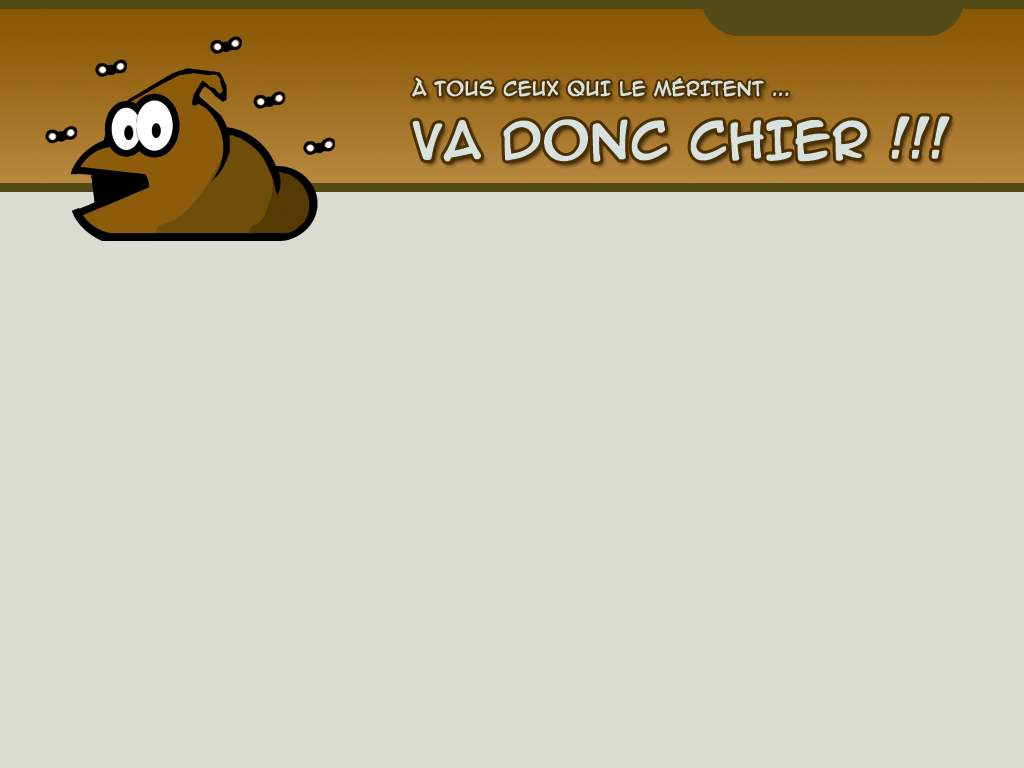
<style>
.page{position:relative;width:1024px;height:768px;background:#dadcd1}
.page>*{position:absolute;margin:0}
.t1{font:18px "AnimeAce2.0BB";color:#d7e1e0;font-weight:bold}
.t2{font:47.1px "AnimeAce2.0BB";color:#d7e1e0;font-weight:bold}
</style>
<div class="page">
<p class="t1" style="left:412px;top:77px;width:377px;height:20px">À TOUS CEUX QUI LE MÉRITENT ...</p>
<p class="t2" style="left:412px;top:116px;width:538px;height:46px">VA DONC CHIER !!!</p>
</div>
